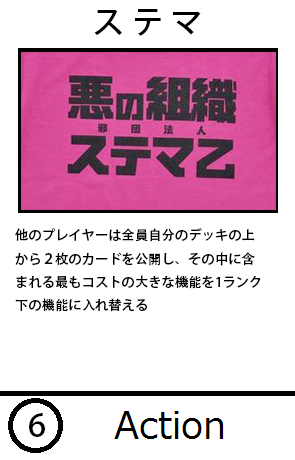
<style>
.page{position:relative;width:295px;height:460px;background:#ffffff}
.page>*{position:absolute;margin:0}
.t1{font:32px "AdobeHeitiStd-Regular";color:#000000}
.t2{font:13.3px "AdobeHeitiStd-Regular";color:#000000}
</style>
<div class="page">
<p class="t1" style="left:94px;top:9px;width:107px;height:27px">ス テ マ</p>
<p class="t2" style="left:15px;top:228px;width:246px;height:84px">他のプレイヤーは全員自分のデッキの上<br>から２枚のカードを公開し、その中に含<br>まれる最もコストの大きな機能を1ランク<br>下の機能に入れ替える</p>
<p class="t1" style="left:29px;top:413px;width:16px;height:24px">6</p>
</div>
